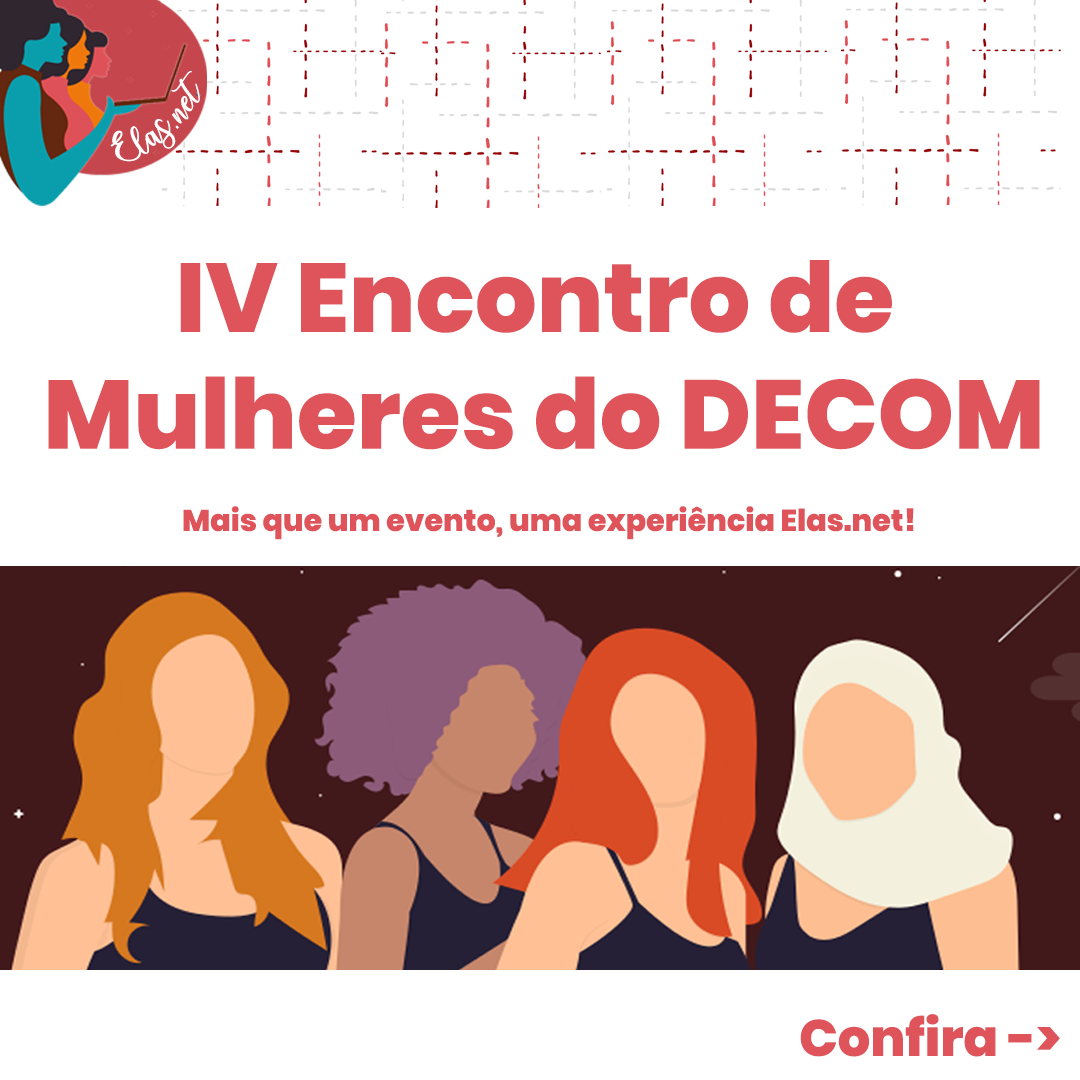
<style>
.page{position:relative;width:1080px;height:1080px;background:#ffffff}
.page>*{position:absolute;margin:0}
.t1{font:25.7px "charlinda-Regular";color:#ffffff;scale:1.18 1}
.t2{font:97.1px "Poppins-ExtraBold";color:#df545b}
.t3{font:30.1px "Poppins-ExtraBold";color:#df545b}
.t4{font:51.1px "Poppins-ExtraBold";color:#df545b}
</style>
<div class="page">
<p class="t1" style="left:110px;top:71px;width:90px;height:91px;rotate:-43deg">Elas.net</p>
<p class="t2" style="left:48px;top:260px;width:992px;height:190px;text-align:center">IV Encontro de <br>Mulheres do DECOM</p>
<p class="t3" style="left:183px;top:506px;width:731px;height:34px">Mais que um evento, uma experiência Elas.net!</p>
<p class="t4" style="left:800px;top:1014px;width:260px;height:43px">Confira -&gt;</p>
</div>
